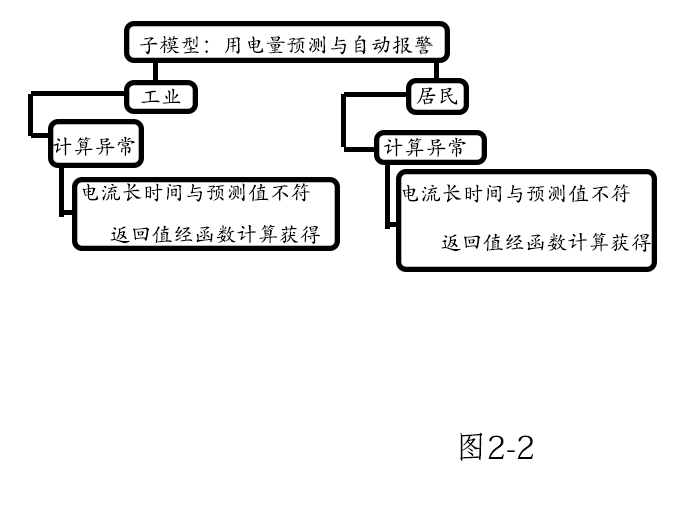
<style>
.page{position:relative;width:676px;height:531px;background:#ffffff}
.page>*{position:absolute;margin:0}
.t1{font:12px "AdobeKaitiStd-Regular";color:#000000}
.t2{font:31.8px "AdobeFangsongStd-Regular";color:#000000}
</style>
<div class="page">
<p class="t1" style="left:140px;top:35px;width:293px;height:20px">子模型：用电量预测与自动报警</p>
<p class="t1" style="left:141px;top:88px;width:40px;height:16px">工业</p>
<p class="t1" style="left:416px;top:87px;width:42px;height:18px">居民</p>
<p class="t1" style="left:52px;top:136px;width:83px;height:20px">计算异常</p>
<p class="t1" style="left:383px;top:137px;width:83px;height:20px">计算异常</p>
<p class="t1" style="left:82px;top:183px;width:228px;height:19px">电流长时间与预测值不符</p>
<p class="t1" style="left:402px;top:184px;width:228px;height:19px">电流长时间与预测值不符</p>
<p class="t1" style="left:110px;top:224px;width:210px;height:20px">返回值经函数计算获得</p>
<p class="t1" style="left:441px;top:232px;width:210px;height:20px">返回值经函数计算获得</p>
<p class="t2" style="left:460px;top:432px;width:73px;height:29px">图2-2</p>
</div>
